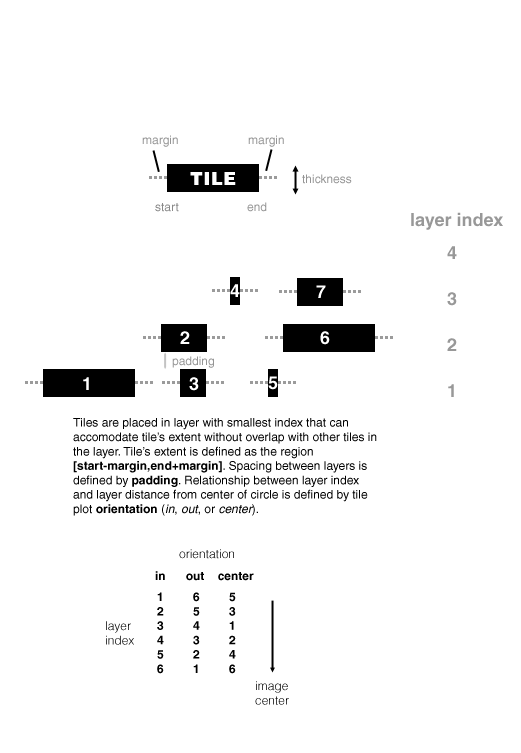
<style>
.page{position:relative;width:521px;height:753px;background:#ffffff}
.page>*{position:absolute;margin:0}
.t1{font:12px "Helvetica";color:#959595}
.t2{font:18px "Helvetica-Black";letter-spacing:0.025em;color:#ffffff}
.t3{font:12px "Helvetica";color:#898989}
.t4{font:18px "Helvetica-Bold";color:#989898}
.t5{font:18px "Helvetica-Bold";color:#ffffff}
.t6{font:12px "Helvetica";color:#000000}
.t7{font:12px "Helvetica-Bold";color:#000000}
.t8{font:12px "Helvetica-Oblique";color:#000000}
.t9{font:12px "Helvetica-Light";color:#000000}
.t10{font:12px "Helvetica-Light"}
</style>
<div class="page">
<p class="t1" style="left:142px;top:135px;width:36px;height:12px">margin</p>
<p class="t1" style="left:248px;top:135px;width:36px;height:12px">margin</p>
<p class="t2" style="left:190px;top:172px;width:46px;height:13px">TILE</p>
<p class="t1" style="left:302px;top:174px;width:50px;height:10px">thickness</p>
<p class="t3" style="left:155px;top:203px;width:24px;height:9px">start</p>
<p class="t1" style="left:247px;top:202px;width:20px;height:10px">end</p>
<p class="t4" style="left:411px;top:212px;width:92px;height:18px">layer index</p>
<p class="t4" style="left:447px;top:246px;width:10px;height:13px">4</p>
<p class="t5" style="left:230px;top:284px;width:10px;height:13px">4</p>
<p class="t5" style="left:316px;top:285px;width:10px;height:13px">7</p>
<p class="t4" style="left:447px;top:292px;width:10px;height:14px">3</p>
<p class="t5" style="left:180px;top:331px;width:10px;height:13px">2</p>
<p class="t5" style="left:320px;top:331px;width:10px;height:14px">6</p>
<p class="t4" style="left:447px;top:338px;width:10px;height:13px">2</p>
<p class="t1" style="left:172px;top:356px;width:42px;height:12px">padding</p>
<p class="t5" style="left:83px;top:377px;width:6px;height:13px">1</p>
<p class="t5" style="left:189px;top:377px;width:10px;height:14px">3</p>
<p class="t5" style="left:268px;top:376px;width:10px;height:14px">5</p>
<p class="t4" style="left:448px;top:384px;width:6px;height:13px">1</p>
<p class="t6" style="left:73px;top:418px;width:304px;height:98px">Tiles are placed in layer with smallest index that can accomodate tile’s extent without overlap with other tiles in the layer. Tile’s extent is defined as the region <span class="t7">[start-margin,end+margin]</span>. Spacing between layers is defined by <span class="t7">padding</span>. Relationship between layer index and layer distance from center of circle is defined by tile plot <span class="t7">orientation</span> (<span class="t8">in</span>, <span class="t8">out</span>, or <span class="t8">center</span>).</p>
<p class="t9" style="left:179px;top:549px;width:55px;height:10px">orientation</p>
<p class="t7" style="left:155px;top:571px;width:99px;height:10px">in      out    center</p>
<p class="t7" style="left:157px;top:592px;width:79px;height:82px">1 6 5<br>2 5 3<br>3 4 1<br>4 3 2 <br>5  2 4<br>6 1 6</p>
<p class="t10" style="left:106px;top:621px;width:28px;height:24px">layer<br>index</p>
<p class="t9" style="left:255px;top:681px;width:34px;height:24px">image<br>center</p>
</div>
